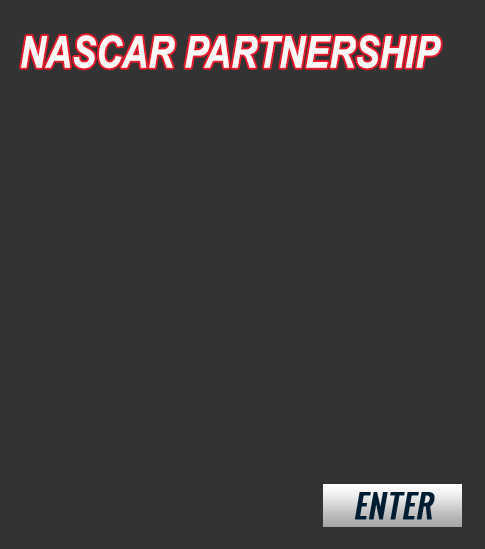
<style>
.page{position:relative;width:485px;height:549px;background:#333333}
.page>*{position:absolute;margin:0}
.t1{font:44px "ArialNarrow-BoldItalic";color:#fbf8f8}
</style>
<div class="page">
<p class="t1" style="left:21px;top:35px;width:420px;height:34px">NASCAR PARTNERSHIP</p>
</div>
